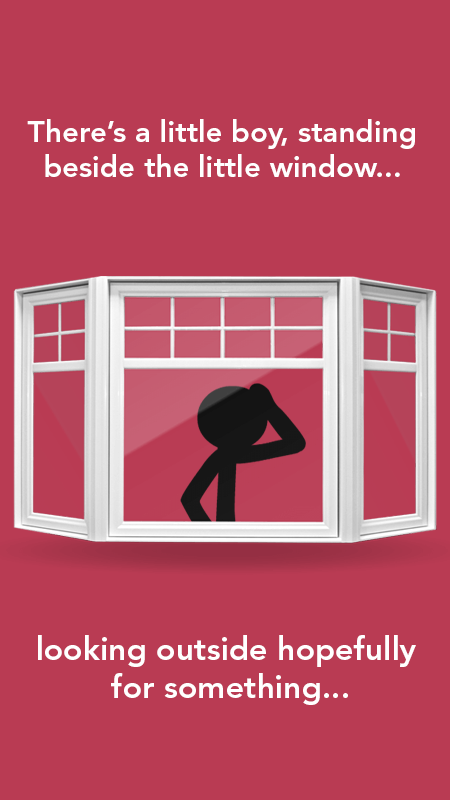
<style>
.page{position:relative;width:450px;height:800px;background:#b93b53}
.page>*{position:absolute;margin:0}
.t1{font:29.6px "AvenirLTStd-Heavy";color:#ffffff}
.t2{font:32px "AvenirLTStd-Heavy";color:#ffffff}
</style>
<div class="page">
<p class="t1" style="left:27px;top:119px;width:388px;height:58px;text-align:center">There’s a little boy, standing<br>beside the little window...</p>
<p class="t2" style="left:38px;top:635px;width:378px;height:70px;text-align:center">looking outside hopefully <br>for something...</p>
</div>
